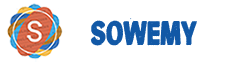
<style>
.page{position:relative;width:248px;height:62px;background:#ffffff}
.page>*{position:absolute;margin:0}
.t1{font:35px "SheRocks";color:#1158a6}
</style>
<div class="page">
<p class="t1" style="left:90px;top:18px;width:107px;height:28px">Sowemy</p>
</div>
